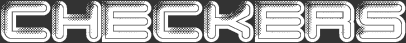
<style>
.page{position:relative;width:406px;height:43px;background:#ffffff}
.page>*{position:absolute;margin:0}
.t1{font:50px "BumpPad";color:#ffffff}
</style>
<div class="page">
<p class="t1" style="left:0px;top:0px;width:406px;height:43px">Checkers</p>
</div>
